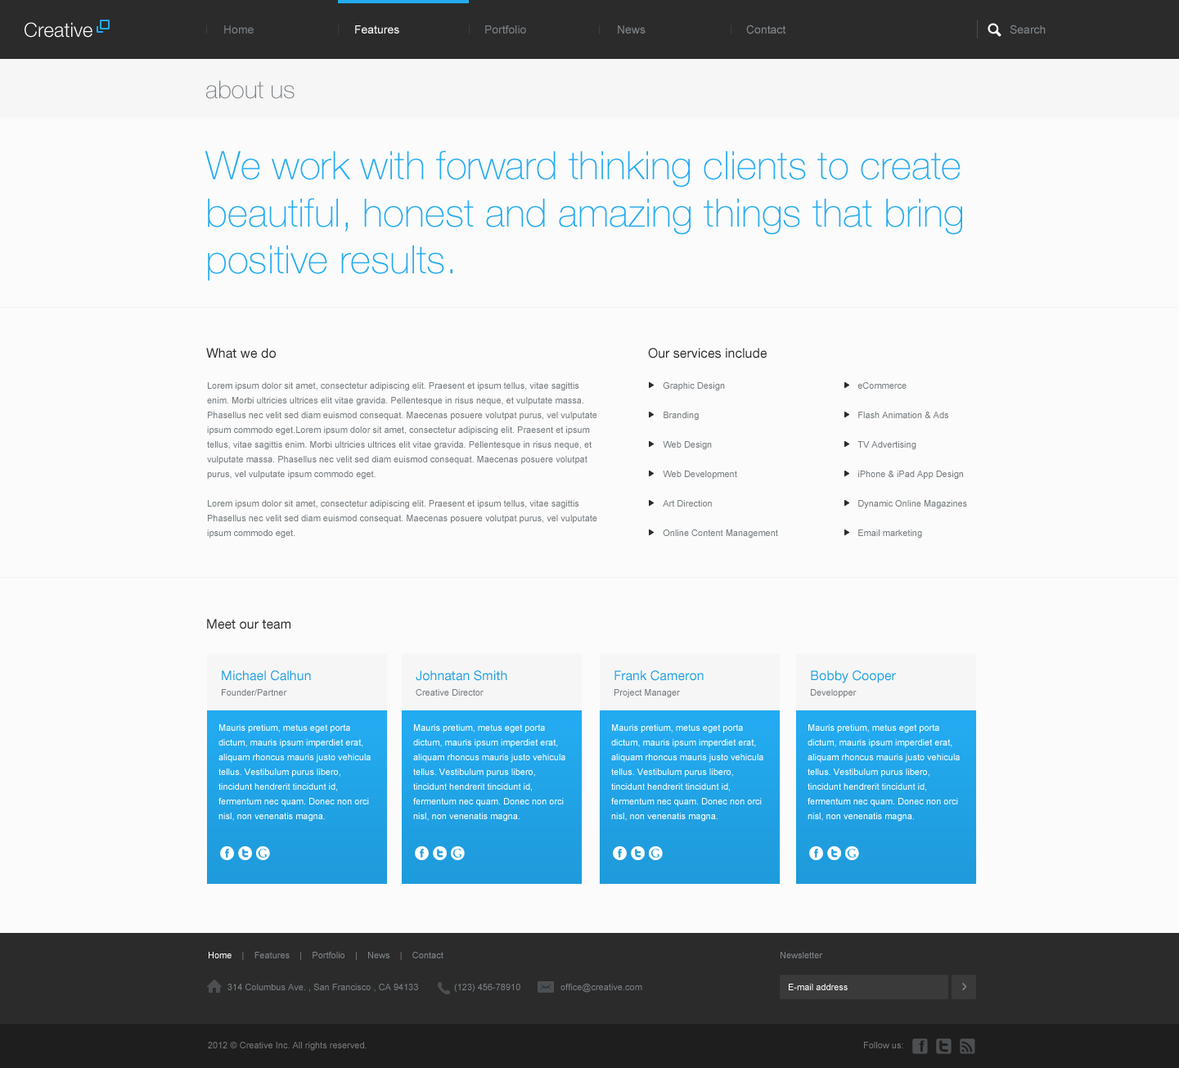
<style>
.page{position:relative;width:1179px;height:1068px;background:#fbfbfb}
.page>*{position:absolute;margin:0}
.t1{font:19.6px "HelveticaNeueLTStd-Lt";color:#ffffff}
.t2{font:8.5px "HelveticaNeueLTStd-Lt";scale:1.35 1}
.t3{font:11.5px "ArialMT";color:#7a8186}
.t4{font:11.5px "ArialMT";color:#ffffff}
.t5{font:11.5px "ArialMT";color:#80878c}
.t6{font:24.5px "HelveticaNeueLTStd-Th";color:#7a8186}
.t7{font:39.3px "HelveticaNeueLTStd-Th";color:#23abf1}
.t8{font:13.1px "HelveticaNeueLTStd-Roman";color:#2b2b2b}
.t9{font:9px/14.7px "ArialMT";color:#757b7f}
.t10{font:9px/29.5px "ArialMT";color:#757b7f}
.t11{font:13.1px "HelveticaNeueLTStd-Roman";color:#1f9fe1}
.t12{font:9px "ArialMT";color:#757b7f}
.t13{font:9px/14.7px "ArialMT";color:#ffffff}
.t14{font:9px "ArialMT";color:#80878c}
.t15{font:9px "ArialMT";color:#ffffff}
.t16{font:9px "ArialMT";color:#7a8186}
.t17{font:9px "ArialMT";color:#797979}
</style>
<div class="page">
<p class="t1" style="left:25px;top:22px;width:67px;height:16px">Creative</p>
<p class="t2" style="left:206px;top:25px;width:1px;height:9px">|</p>
<p class="t3" style="left:224px;top:25px;width:30px;height:9px">Home</p>
<p class="t2" style="left:338px;top:25px;width:1px;height:9px">|</p>
<p class="t4" style="left:355px;top:25px;width:44px;height:9px">Features</p>
<p class="t2" style="left:469px;top:25px;width:1px;height:9px">|</p>
<p class="t3" style="left:485px;top:25px;width:41px;height:9px">Portfolio</p>
<p class="t2" style="left:599px;top:25px;width:1px;height:9px">|</p>
<p class="t5" style="left:618px;top:25px;width:28px;height:9px">News</p>
<p class="t2" style="left:731px;top:25px;width:0px;height:9px">|</p>
<p class="t5" style="left:746px;top:25px;width:40px;height:9px">Contact</p>
<p class="t5" style="left:1010px;top:25px;width:36px;height:9px">Search</p>
<p class="t6" style="left:206px;top:80px;width:89px;height:19px">about us</p>
<p class="t7" style="left:205px;top:151px;width:757px;height:130px">We work with forward thinking clients to create <br>beautiful, honest and amazing things that bring <br>positive results.</p>
<p class="t8" style="left:206px;top:348px;width:70px;height:10px">What we do</p>
<p class="t8" style="left:648px;top:348px;width:119px;height:10px">Our services include</p>
<p class="t9" style="left:207px;top:382px;width:390px;height:156px">Lorem ipsum dolor sit amet, consectetur adipiscing elit. Praesent et ipsum tellus, vitae sagittis enim. Morbi ultricies ultrices elit vitae gravida. Pellentesque in risus neque, et vulputate massa. Phasellus nec velit sed diam euismod consequat. Maecenas posuere volutpat purus, vel vulputate ipsum commodo eget.Lorem ipsum dolor sit amet, consectetur adipiscing elit. Praesent et ipsum tellus, vitae sagittis enim. Morbi ultricies ultrices elit vitae gravida. Pellentesque in risus neque, et vulputate massa. Phasellus nec velit sed diam euismod consequat. Maecenas posuere volutpat purus, vel vulputate ipsum commodo eget.<br><br>Lorem ipsum dolor sit amet, consectetur adipiscing elit. Praesent et ipsum tellus, vitae sagittis Phasellus nec velit sed diam euismod consequat. Maecenas posuere volutpat purus, vel vulputate ipsum commodo eget.</p>
<p class="t10" style="left:663px;top:382px;width:115px;height:156px">Graphic Design<br>    Branding<br>    Web Design<br>    Web Development<br>    Art Direction<br>    Online Content Management</p>
<p class="t10" style="left:857px;top:382px;width:110px;height:156px">eCommerce<br>    Flash Animation &amp; Ads<br>    TV Advertising<br>    iPhone &amp; iPad App Design<br>    Dynamic Online Magazines<br>    Email marketing</p>
<p class="t8" style="left:207px;top:619px;width:83px;height:10px">Meet our team</p>
<p class="t11" style="left:222px;top:670px;width:89px;height:11px">Michael Calhun</p>
<p class="t11" style="left:416px;top:670px;width:91px;height:11px">Johnatan Smith</p>
<p class="t11" style="left:614px;top:670px;width:90px;height:11px">Frank Cameron</p>
<p class="t11" style="left:811px;top:670px;width:85px;height:13px">Bobby Cooper</p>
<p class="t12" style="left:222px;top:689px;width:65px;height:6px">Founder/Partner</p>
<p class="t12" style="left:416px;top:689px;width:68px;height:6px">Creative Director</p>
<p class="t12" style="left:614px;top:689px;width:66px;height:9px">Project Manager</p>
<p class="t12" style="left:811px;top:689px;width:46px;height:9px">Developper</p>
<p class="t13" style="left:218px;top:724px;width:153px;height:97px">Mauris pretium, metus eget porta dictum, mauris ipsum imperdiet erat, aliquam rhoncus mauris justo vehicula tellus. Vestibulum purus libero, tincidunt hendrerit tincidunt id, fermentum nec quam. Donec non orci nisl, non venenatis magna.</p>
<p class="t13" style="left:413px;top:724px;width:152px;height:97px">Mauris pretium, metus eget porta dictum, mauris ipsum imperdiet erat, aliquam rhoncus mauris justo vehicula tellus. Vestibulum purus libero, tincidunt hendrerit tincidunt id, fermentum nec quam. Donec non orci nisl, non venenatis magna.</p>
<p class="t13" style="left:611px;top:724px;width:152px;height:97px">Mauris pretium, metus eget porta dictum, mauris ipsum imperdiet erat, aliquam rhoncus mauris justo vehicula tellus. Vestibulum purus libero, tincidunt hendrerit tincidunt id, fermentum nec quam. Donec non orci nisl, non venenatis magna.</p>
<p class="t13" style="left:808px;top:724px;width:152px;height:97px">Mauris pretium, metus eget porta dictum, mauris ipsum imperdiet erat, aliquam rhoncus mauris justo vehicula tellus. Vestibulum purus libero, tincidunt hendrerit tincidunt id, fermentum nec quam. Donec non orci nisl, non venenatis magna.</p>
<p class="t14" style="left:209px;top:952px;width:234px;height:9px"><span class="t15">Home   </span> |    Features    |    Portfolio    |    News    |    Contact</p>
<p class="t14" style="left:781px;top:952px;width:42px;height:6px">Newsletter</p>
<p class="t16" style="left:227px;top:983px;width:191px;height:9px">314 Columbus Ave. , San Francisco , CA 94133</p>
<p class="t16" style="left:454px;top:983px;width:66px;height:9px">(123) 456-78910</p>
<p class="t16" style="left:560px;top:983px;width:82px;height:9px">office@creative.com</p>
<p class="t15" style="left:789px;top:983px;width:59px;height:7px">E-mail address</p>
<p class="t17" style="left:208px;top:1042px;width:159px;height:9px">2012 © Creative Inc. All rights reserved.</p>
<p class="t17" style="left:864px;top:1042px;width:39px;height:6px">Follow us:</p>
</div>
